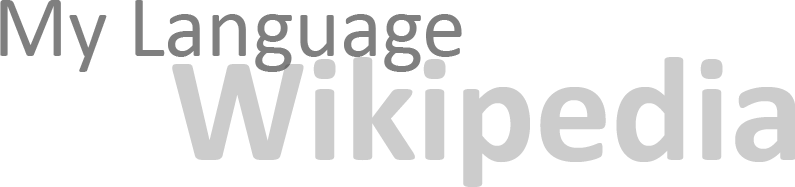
<style>
.page{position:relative;width:795px;height:187px;background:#ffffff}
.page>*{position:absolute;margin:0}
.t1{font:87.7px "Calibri";color:#7f7f7f}
.t2{font:151.7px "Calibri-Bold";color:#cccccc}
</style>
<div class="page">
<p class="t1" style="left:0px;top:0px;width:462px;height:72px">My Language</p>
<p class="t2" style="left:172px;top:57px;width:623px;height:130px">Wikipedia</p>
</div>
